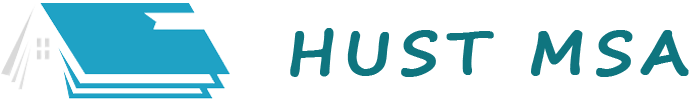
<style>
.page{position:relative;width:700px;height:100px;background:#ffffff}
.page>*{position:absolute;margin:0}
.t1{font:60.3px "SegoePrint-Bold";letter-spacing:0.12em;color:#0f757f;text-transform:uppercase;font-weight:bold}
</style>
<div class="page">
<p class="t1" style="left:290px;top:28px;width:399px;height:49px">Hust MSA</p>
</div>
